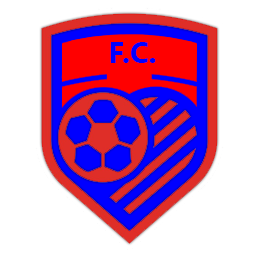
<style>
.page{position:relative;width:256px;height:256px;background:#ffffff}
.page>*{position:absolute;margin:0}
.t1{font:30px "NirmalaUI-Bold";color:#0000ff}
</style>
<div class="page">
<p class="t1" style="left:110px;top:42px;width:46px;height:21px">F.C.</p>
</div>
